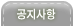
<style>
.page{position:relative;width:74px;height:26px;background:#9d9d9d}
.page>*{position:absolute;margin:0}
.t1{font:12px "SandKg";color:#ffffff;scale:0.9 1}
</style>
<div class="page">
<p class="t1" style="left:17px;top:8px;width:39px;height:12px">공지사항</p>
</div>
